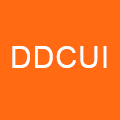
<style>
.page{position:relative;width:120px;height:120px;background:#ff6a13}
.page>*{position:absolute;margin:0}
.t1{font:30px "ArialMT";letter-spacing:0.024em;color:#ffffff}
</style>
<div class="page">
<p class="t1" style="left:12px;top:46px;width:95px;height:22px">DDCUI</p>
</div>
